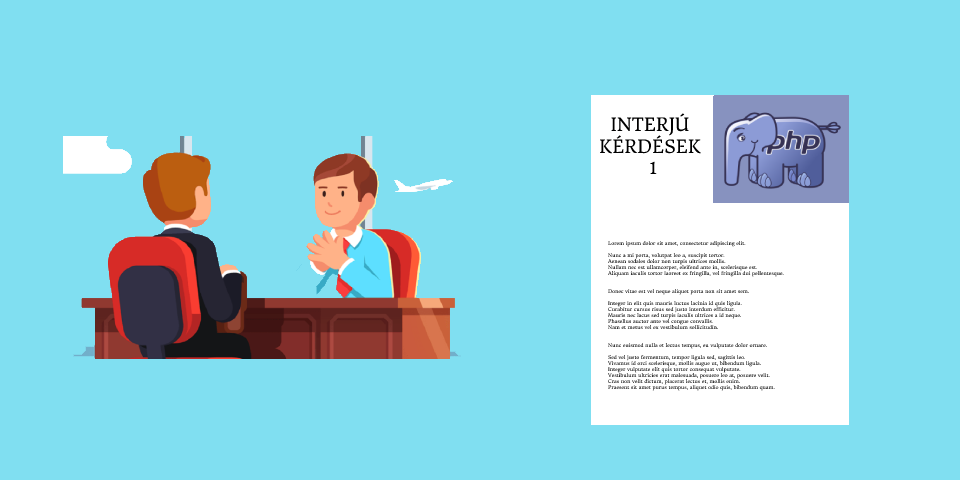
<style>
.page{position:relative;width:960px;height:480px;background:#80dff1}
.page>*{position:absolute;margin:0}
.t1{font:18px "DonegalOne-Regular";color:#000000}
.t2{font:5px "DonegalOne-Regular"}
</style>
<div class="page">
<p class="t1" style="left:599px;top:113px;width:102px;height:61px;text-align:center">INTERJÚ <br>KÉRDÉSEK <br>1</p>
<p class="t2" style="left:607px;top:240px;width:177px;height:151px">Lorem ipsum dolor sit amet, consectetur adipiscing elit.<br><br>Nunc a mi porta, volutpat leo a, suscipit tortor.<br>Aenean sodales dolor non turpis ultrices mollis.<br>Nullam nec est ullamcorper, eleifend ante in, scelerisque est.<br>Aliquam iaculis tortor laoreet ex fringilla, vel fringilla dui pellentesque.<br><br><br>Donec vitae est vel neque aliquet porta non sit amet sem.<br><br>Integer in elit quis mauris luctus lacinia id quis ligula.<br>Curabitur cursus risus sed justo interdum efficitur.<br>Mauris nec lacus sed turpis iaculis ultrices a id neque.<br>Phasellus auctor ante vel congue convallis.<br>Nam et metus vel ex vestibulum sollicitudin.<br><br><br>Nunc euismod nulla et lectus tempus, eu vulputate dolor ornare.<br><br>Sed vel justo fermentum, tempor ligula sed, sagittis leo.<br>Vivamus id orci scelerisque, mollis augue ut, bibendum ligula.<br>Integer vulputate elit quis tortor consequat vulputate.<br>Vestibulum ultricies erat malesuada, posuere leo at, posuere velit.<br>Cras non velit dictum, placerat lectus et, mollis enim.<br>Praesent sit amet purus tempus, aliquet odio quis, bibendum quam.</p>
</div>
